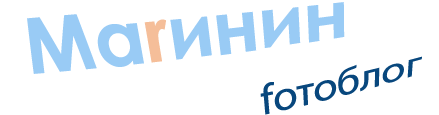
<style>
.page{position:relative;width:439px;height:115px;background:#ffffff}
.page>*{position:absolute;margin:0}
.t1{font:40px/62px "MyriadPro-Regular";color:#08477d;scale:1.13 1}
.t2{font:65px/62px "CenturyGothic-Bold";color:#99cbf5;scale:1.13 1}
.t3{font:65px/62px "CenturyGothic-Bold";color:#f5be99;scale:1.13 1}
</style>
<div class="page">
<p class="t1" style="left:27px;top:2px;width:395px;height:113px;text-align:center;rotate:-7deg"><span class="t2">Ма</span><span class="t3">r</span><span class="t2">инин<br>                          </span>fотоблог</p>
</div>
